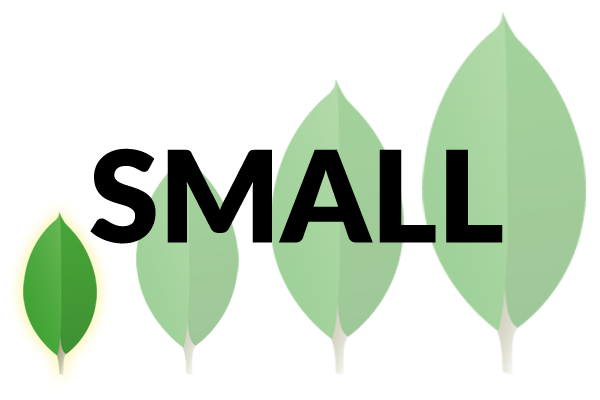
<style>
.page{position:relative;width:600px;height:400px;background:#ffffff}
.page>*{position:absolute;margin:0}
.t1{font:126.8px "Lato-Black";color:#000000}
</style>
<div class="page">
<p class="t1" style="left:90px;top:148px;width:413px;height:96px">SMALL</p>
</div>
